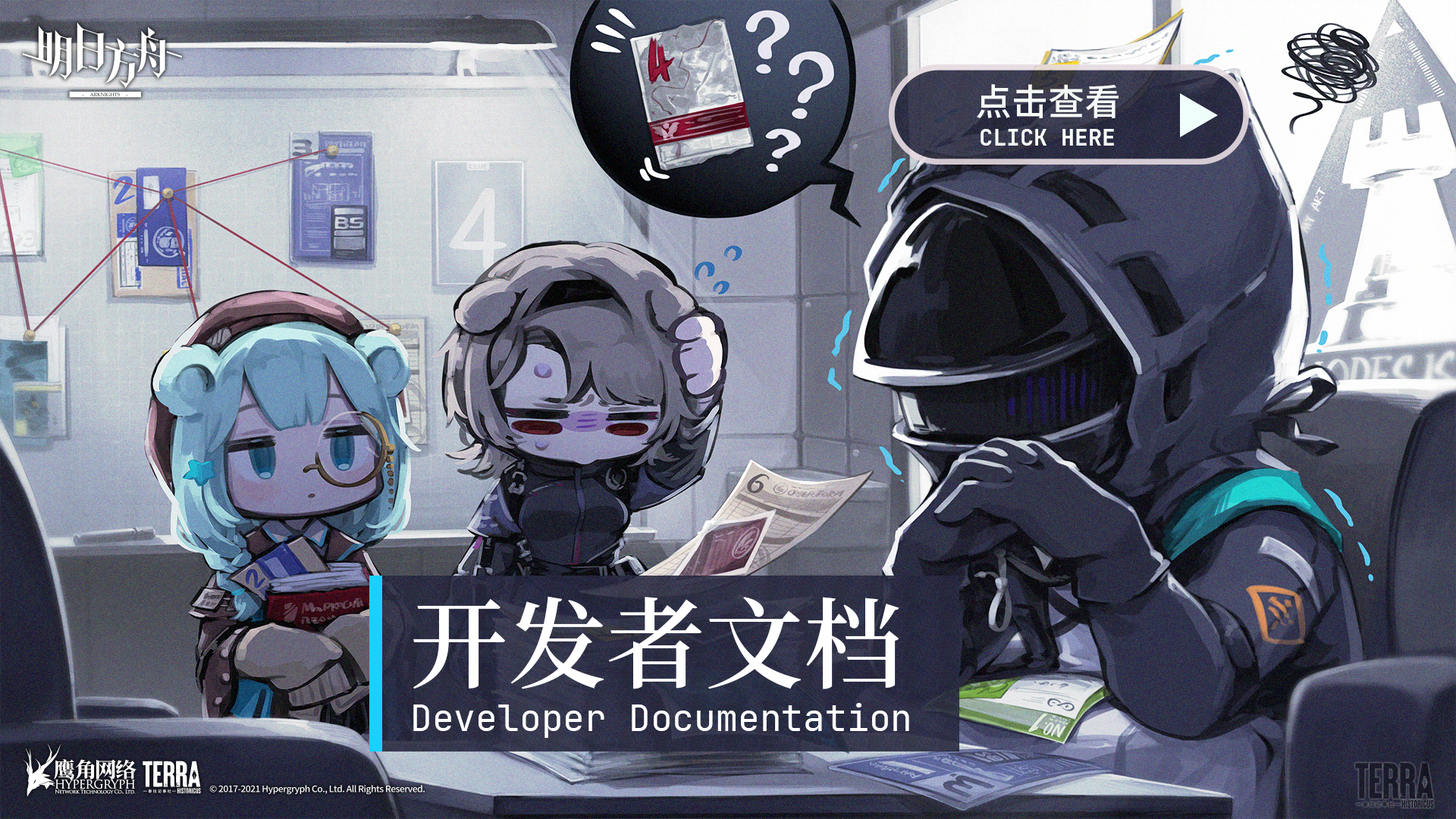
<style>
.page{position:relative;width:1456px;height:819px}
.page>*{position:absolute;margin:0}
.t1{font:36.4px "SourceHanSansSC-Medium";color:#f5fbf7}
.t2{font:22.7px "JetBrainsMono-Bold";color:#f5fbf7}
.t3{font:98.6px "SourceHanSerifCN-SemiBold";color:#ffffff}
.t4{font:36.4px "JetBrainsMono-Regular";color:#ffffff}
</style>
<div class="page">
<p class="t1" style="left:977px;top:84px;width:142px;height:34px">点击查看</p>
<p class="t2" style="left:981px;top:129px;width:133px;height:17px">CLICK HERE</p>
<p class="t3" style="left:413px;top:596px;width:486px;height:93px">开发者文档</p>
<p class="t4" style="left:413px;top:703px;width:496px;height:35px">Developer Documentation</p>
</div>
